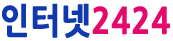
<style>
.page{position:relative;width:173px;height:41px;background:#ffffff}
.page>*{position:absolute;margin:0}
.t1{font:35px "NanumGothicExtraBold";color:#e6096c;font-weight:bold;scale:0.9 1}
.t2{font:35px "NanumGothicExtraBold";color:#1039ad;font-weight:bold;scale:0.9 1}
</style>
<div class="page">
<p class="t1" style="left:2px;top:3px;width:168px;height:36px"><span class="t2">인터넷</span>2424</p>
</div>
